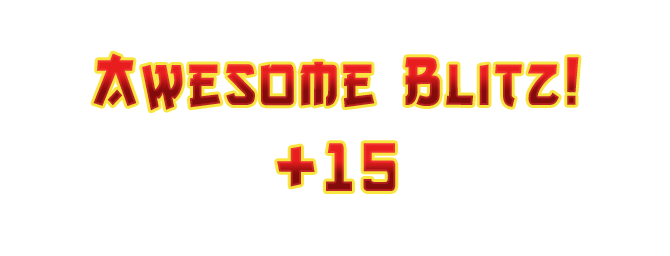
<style>
.page{position:relative;width:670px;height:256px;background:#ffffff}
.page>*{position:absolute;margin:0}
.t1{font:72px "heiTOLENOVOLEPhone";letter-spacing:0.06em;scale:0.95 1}
</style>
<div class="page">
<p class="t1" style="left:93px;top:53px;width:486px;height:58px">Awesome Blitz!</p>
<p class="t1" style="left:277px;top:143px;width:119px;height:48px">+15</p>
</div>
